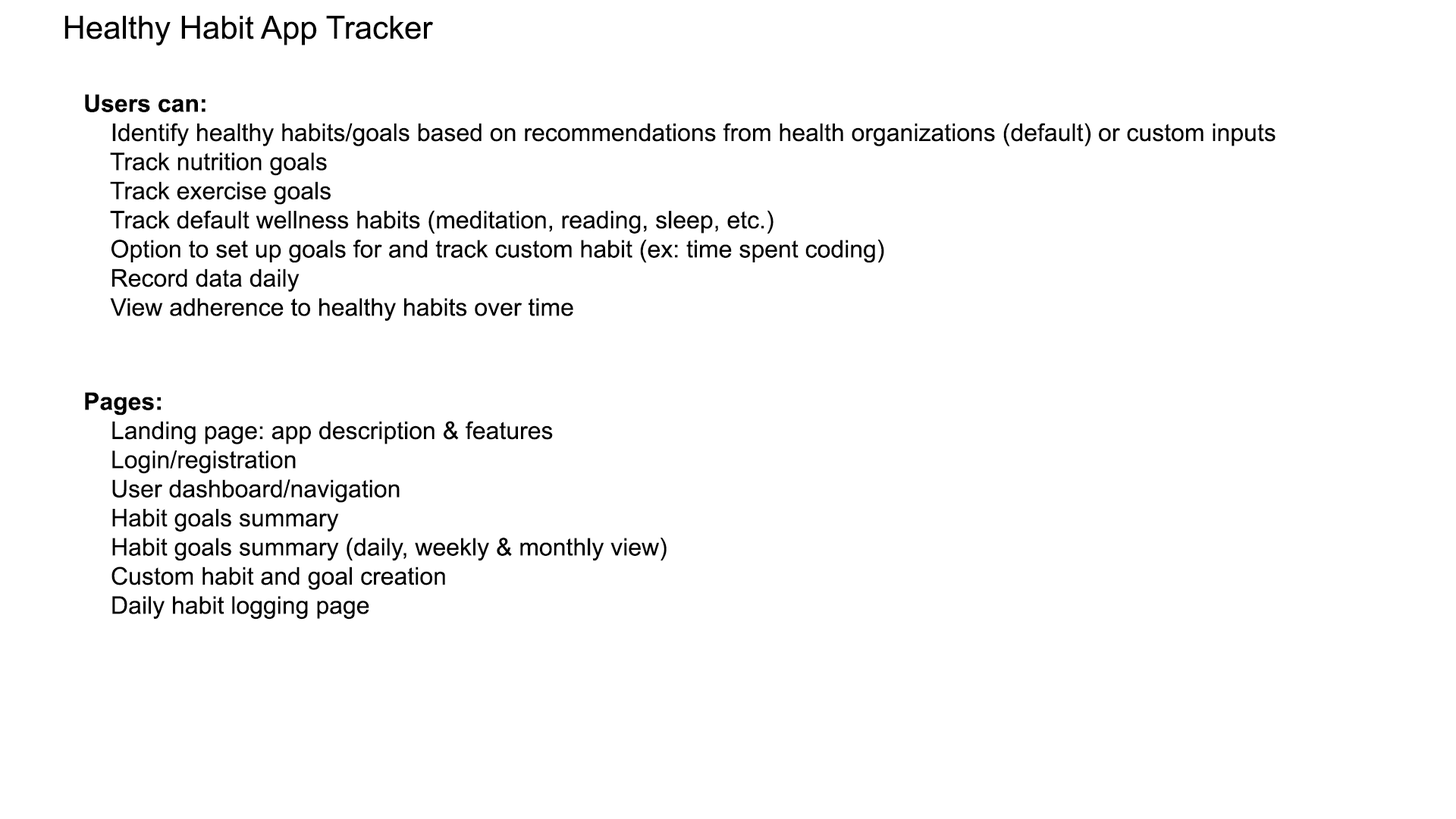
<style>
.page{position:relative;width:1456px;height:819px;background:#ffffff}
.page>*{position:absolute;margin:0}
.t1{font:31.8px "ArialMT";color:#000000}
.t2{font:24.3px "ArialMT";color:#000000}
.t3{font:24.3px "Arial-BoldMT";color:#000000}
</style>
<div class="page">
<p class="t1" style="left:64px;top:15px;width:369px;height:30px">Healthy Habit App Tracker</p>
<p class="t2" style="left:85px;top:94px;width:1190px;height:228px"><span class="t3">Users can:<br></span> Identify healthy habits/goals based on recommendations from health organizations (default) or custom inputs<br>    Track nutrition goals<br>    Track exercise goals<br>    Track default wellness habits (meditation, reading, sleep, etc.)<br>    Option to set up goals for and track custom habit (ex: time spent coding)<br>    Record data daily<br>    View adherence to healthy habits over time</p>
<p class="t2" style="left:85px;top:392px;width:582px;height:228px"><span class="t3">Pages:<br></span> Landing page: app description &amp; features<br> Login/registration<br> User dashboard/navigation<br> Habit goals summary<br> Habit goals summary (daily, weekly &amp; monthly view)<br> Custom habit and goal creation<br> Daily habit logging page</p>
</div>
